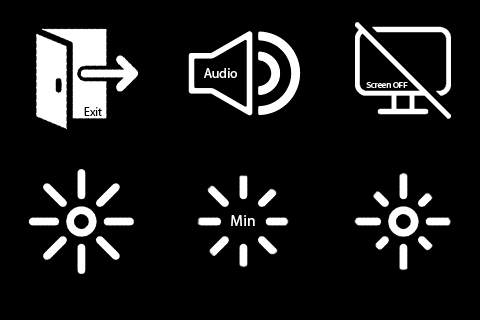
<style>
.page{position:relative;width:480px;height:320px;background:#000000}
.page>*{position:absolute;margin:0}
.t1{font:13.6px "MyriadPro-Regular";color:#ffffff}
.t2{font:8.7px "MyriadPro-Regular";color:#ffffff}
.t3{font:12px "MyriadPro-Regular";color:#000000}
.t4{font:12px "MyriadPro-Regular";color:#ffffff}
.t5{font:15.4px "MyriadPro-Regular";color:#ffffff}
</style>
<div class="page">
<p class="t1" style="left:204px;top:68px;width:33px;height:10px">Audio</p>
<p class="t2" style="left:366px;top:82px;width:42px;height:6px">Screen OFF</p>
<p class="t3" style="left:84px;top:107px;width:18px;height:9px"><span class="t4"><br></span>Exit</p>
<p class="t5" style="left:231px;top:215px;width:24px;height:11px">Min</p>
</div>
